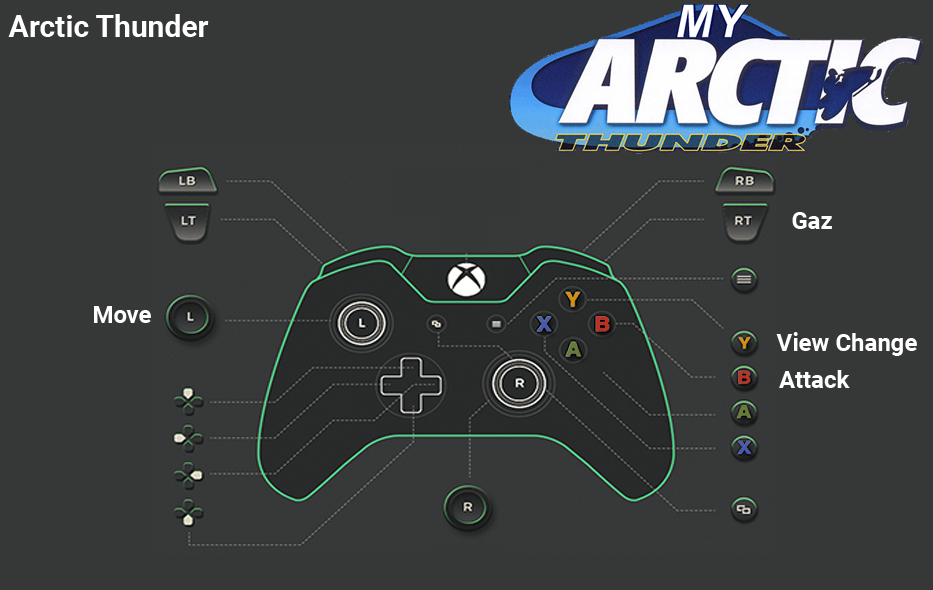
<style>
.page{position:relative;width:933px;height:590px;background:#363838}
.page>*{position:absolute;margin:0}
.t1{font:30px "Roboto-Bold";color:#ffffff}
.t2{font:24px "Roboto-Bold";color:#ffffff}
</style>
<div class="page">
<p class="t1" style="left:8px;top:14px;width:201px;height:23px">Arctic Thunder</p>
<p class="t2" style="left:792px;top:212px;width:40px;height:17px">Gaz</p>
<p class="t2" style="left:94px;top:306px;width:57px;height:17px">Move</p>
<p class="t2" style="left:776px;top:332px;width:141px;height:24px">View Change</p>
<p class="t2" style="left:779px;top:370px;width:71px;height:18px">Attack</p>
</div>
